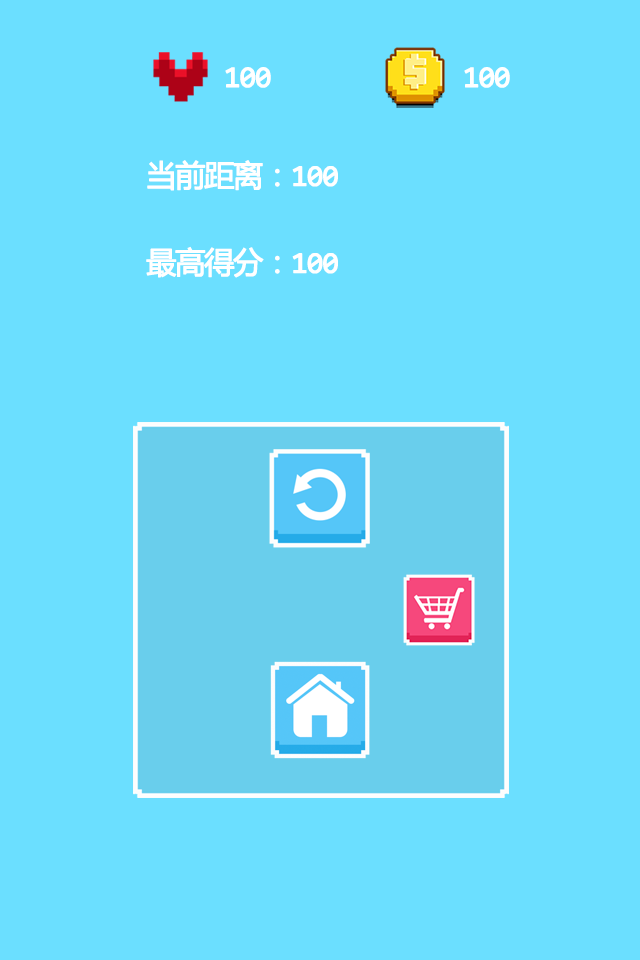
<style>
.page{position:relative;width:640px;height:960px;background:#6bdfff}
.page>*{position:absolute;margin:0}
.t1{font:30px "YaHei-Consolas-Hybrid";letter-spacing:-0.06em;color:#ffffff;font-weight:bold}
</style>
<div class="page">
<p class="t1" style="left:225px;top:67px;width:46px;height:21px">100</p>
<p class="t1" style="left:464px;top:67px;width:46px;height:21px">100</p>
<p class="t1" style="left:147px;top:160px;width:191px;height:31px">当前距离：100</p>
<p class="t1" style="left:146px;top:246px;width:192px;height:32px">最高得分：100</p>
</div>
